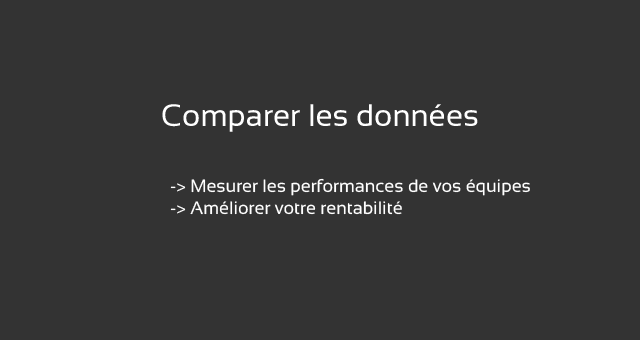
<style>
.page{position:relative;width:640px;height:340px;background:#333333}
.page>*{position:absolute;margin:0}
.t1{font:31px "Sansation-Regular";color:#ffffff}
.t2{font:18px "Sansation-Regular";color:#ffffff}
</style>
<div class="page">
<p class="t1" style="left:162px;top:104px;width:316px;height:28px">Comparer les données</p>
<p class="t2" style="left:170px;top:178px;width:360px;height:37px">-&gt; Mesurer les performances de vos équipes<br>-&gt; Améliorer votre rentabilité</p>
</div>
